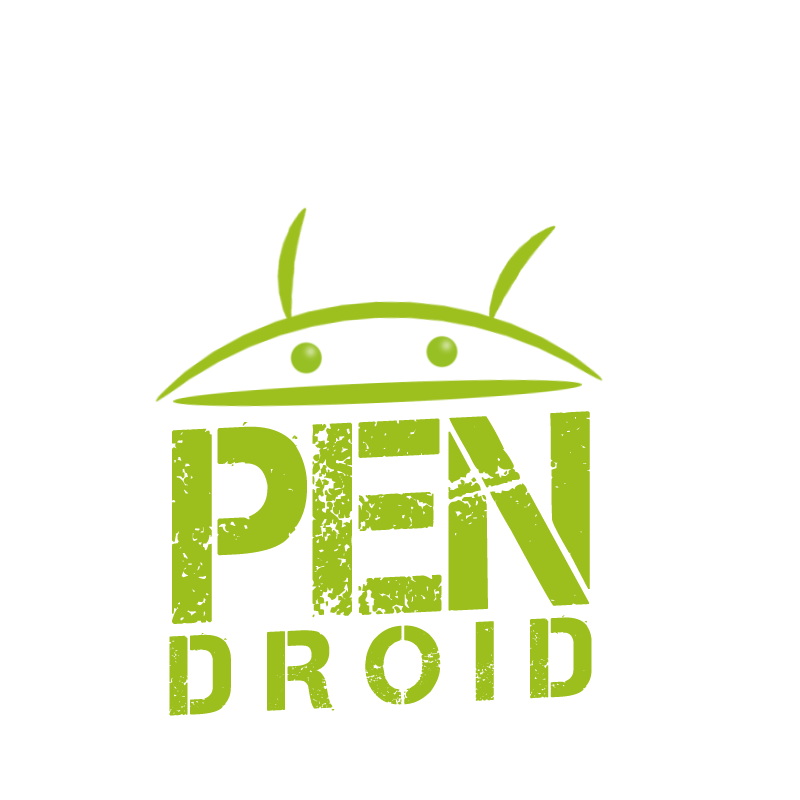
<style>
.page{position:relative;width:800px;height:800px;background:#ffffff}
.page>*{position:absolute;margin:0}
.t1{font:275px "Captureit";color:#9dbf1e;scale:0.9 1}
.t2{font:112px "Captureit";color:#9dbf1e}
</style>
<div class="page">
<p class="t1" style="left:172px;top:411px;width:418px;height:213px;rotate:-3deg">PEN</p>
<p class="t2" style="left:169px;top:615px;width:423px;height:101px;rotate:-3deg">D R O I D</p>
</div>
